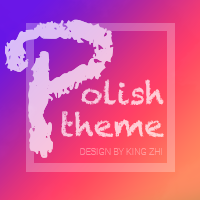
<style>
.page{position:relative;width:200px;height:200px}
.page>*{position:absolute;margin:0}
.t1{font:166.1px "Chalkduster";color:#e9c0ea}
.t2{font:30.9px "Chalkduster";color:#fdc8d9}
.t3{font:31.2px "Chalkduster";color:#ffcad7}
.t4{font:9px "Roboto-Thin";color:#ff8f9a;text-transform:uppercase}
</style>
<div class="page">
<p class="t1" style="left:5px;top:19px;width:109px;height:139px">P</p>
<p class="t2" style="left:81px;top:79px;width:83px;height:26px">olish</p>
<p class="t3" style="left:61px;top:110px;width:103px;height:28px">theme</p>
<p class="t4" style="left:80px;top:148px;width:82px;height:7px">Design by king Zhi</p>
</div>
